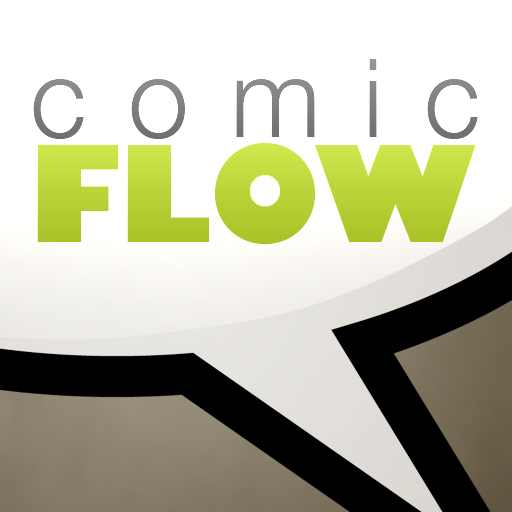
<style>
.page{position:relative;width:512px;height:512px;background:#ffffff}
.page>*{position:absolute;margin:0}
.t1{font:109px "HelveticaNeue-Light";letter-spacing:0.38em;color:#807f7e}
.t2{font:130.8px "GillSansStd-UltraBold";color:#bcd439}
</style>
<div class="page">
<p class="t1" style="left:33px;top:59px;width:445px;height:80px">comic</p>
<p class="t2" style="left:37px;top:142px;width:439px;height:102px">FLOW</p>
</div>
